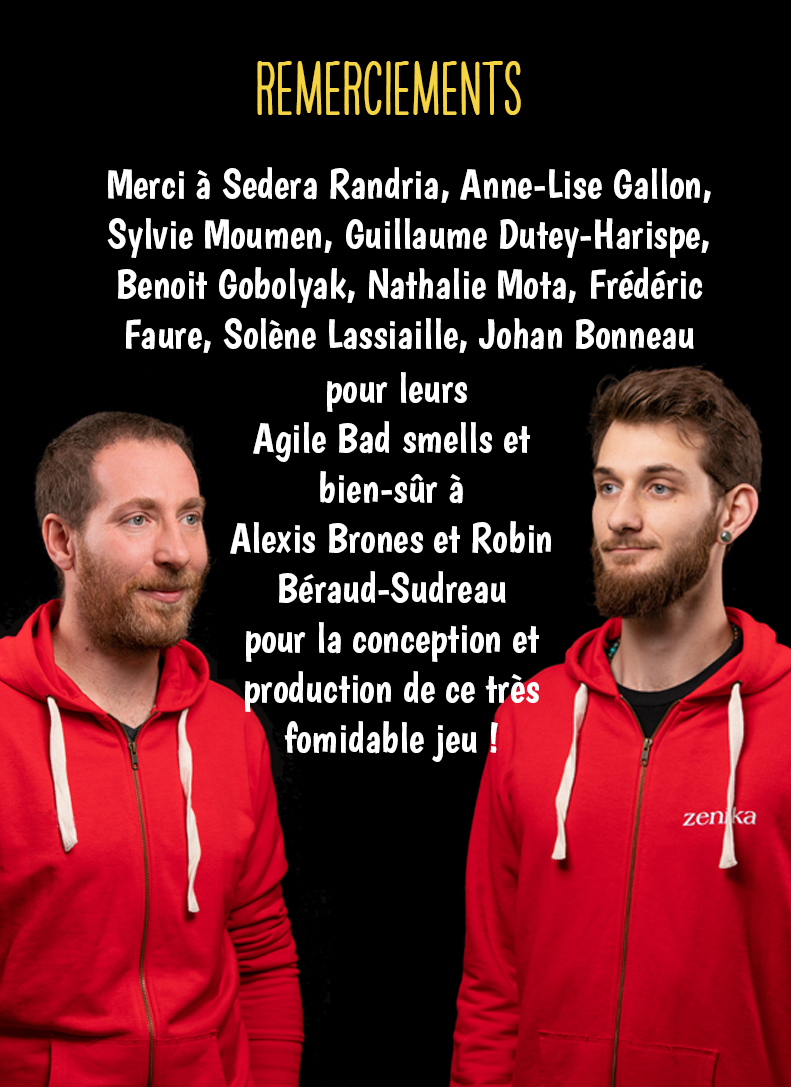
<style>
.page{position:relative;width:791px;height:1087px;background:#000000}
.page>*{position:absolute;margin:0}
.t1{font:66.7px "HAVEANICEDAYTallW04-Bold";color:#f4d443}
.t2{font:41.7px "Boogaloo-Regular";color:#ffffff}
</style>
<div class="page">
<p class="t1" style="left:257px;top:61px;width:264px;height:54px">REMERCIEMENTS</p>
<p class="t2" style="left:107px;top:167px;width:604px;height:186px;text-align:center">Merci à Sedera Randria, Anne-Lise Gallon, Sylvie Moumen, Guillaume Dutey-Harispe, Benoit Gobolyak, Nathalie Mota, Frédéric Faure, Solène Lassiaille, Johan Bonneau</p>
<p class="t2" style="left:230px;top:372px;width:321px;height:390px;text-align:center">pour leurs <br>Agile Bad smells et bien-sûr à <br>Alexis Brones et Robin Béraud-Sudreau<br>pour la conception et production de ce très fomidable jeu !</p>
</div>
